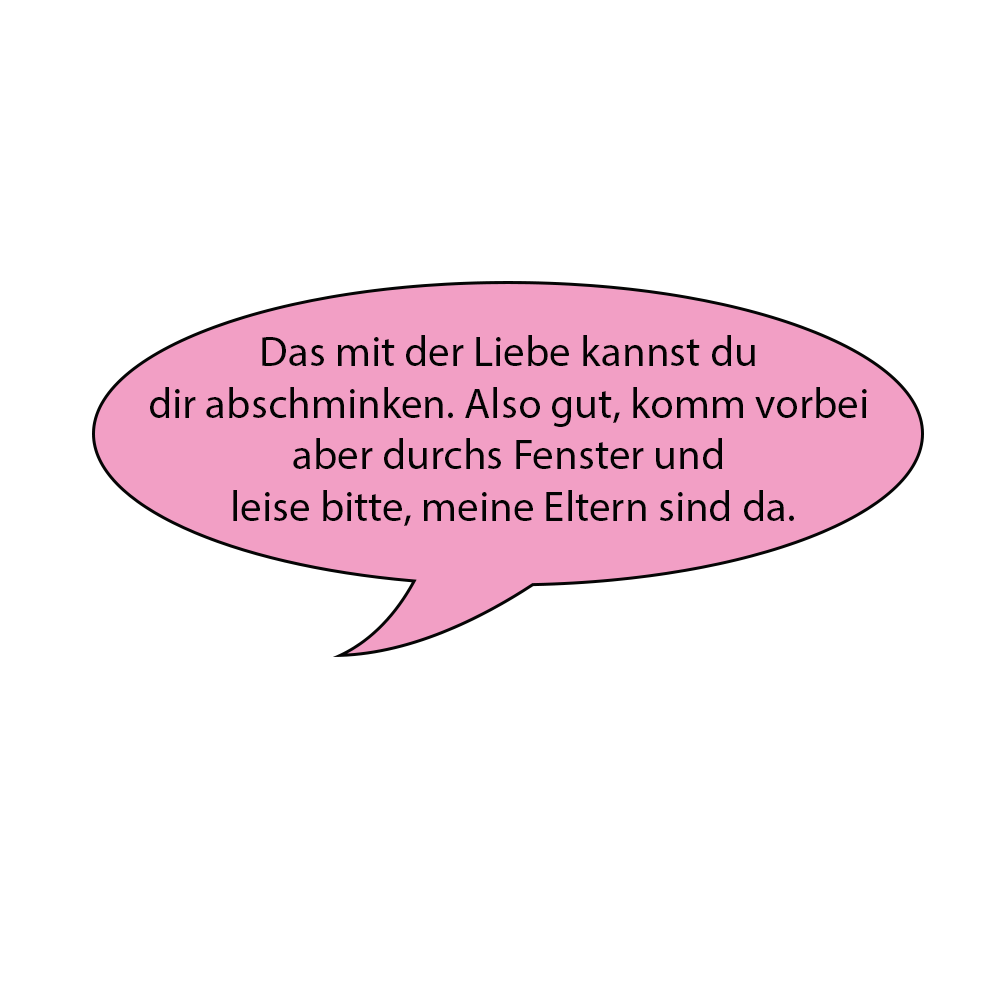
<style>
.page{position:relative;width:1000px;height:1000px;background:#ffffff}
.page>*{position:absolute;margin:0}
.t1{font:43px "MyriadPro-Regular";color:#030303}
</style>
<div class="page">
<p class="t1" style="left:150px;top:335px;width:717px;height:191px;text-align:center">Das mit der Liebe kannst du <br>dir abschminken. Also gut, komm vorbei <br>aber durchs Fenster und <br>leise bitte, meine Eltern sind da.</p>
</div>
